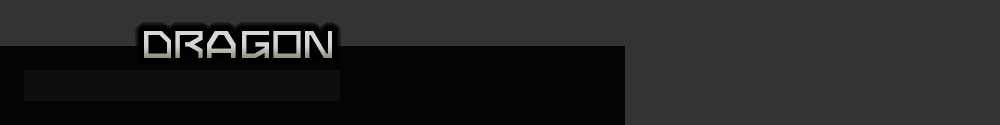
<style>
.page{position:relative;width:1000px;height:125px;background:#333333}
.page>*{position:absolute;margin:0}
.t1{font:31px "7THDR2020Regular";letter-spacing:0.005em}
.t2{font:31px "7THDR2020Regular";letter-spacing:0.065em;scale:1.05 1}
</style>
<div class="page">
<p class="t1" style="left:144px;top:31px;width:188px;height:27px">DR<span class="t2">A</span>GON</p>
</div>
